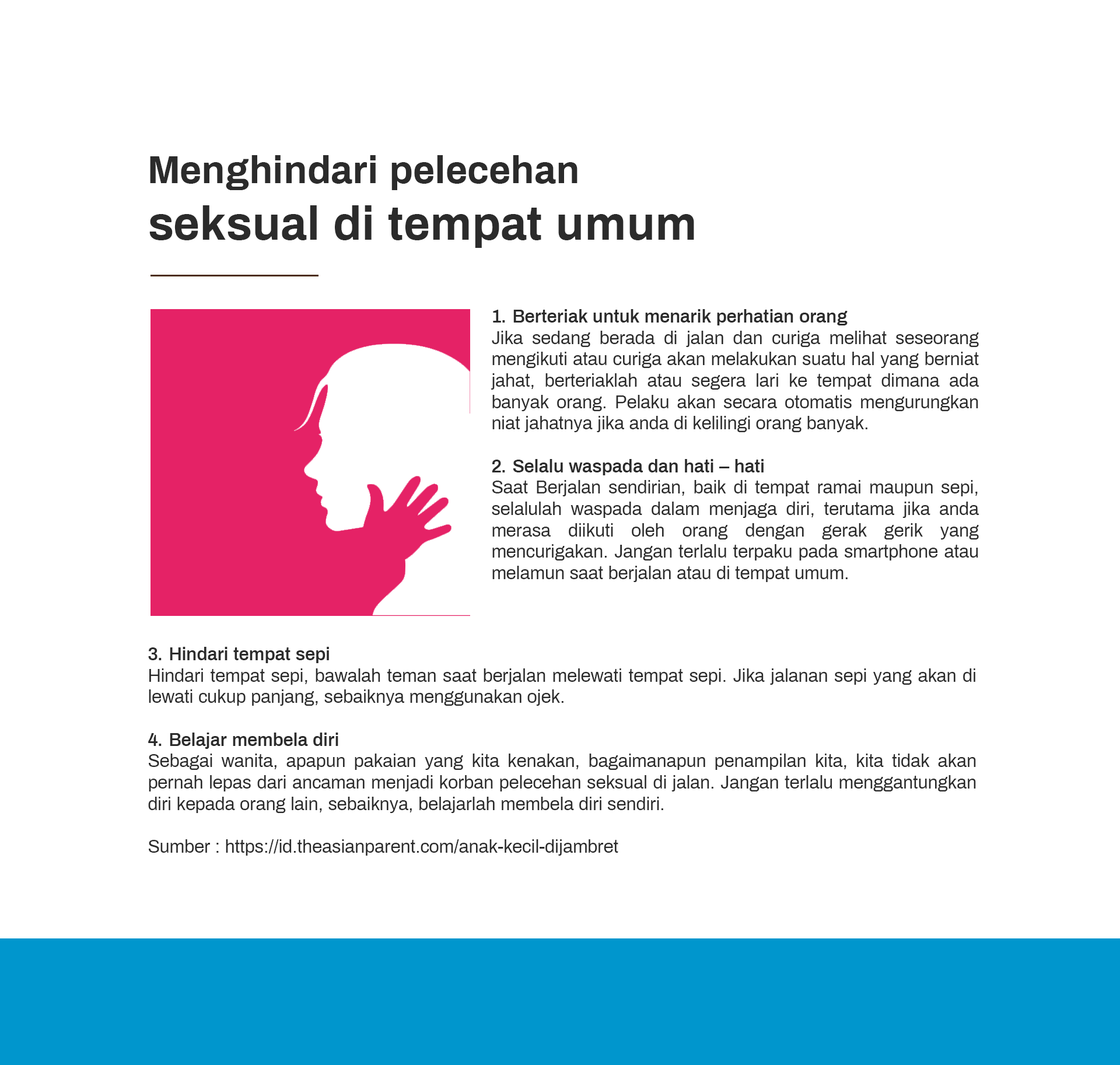
<style>
.page{position:relative;width:1120px;height:1065px;background:#ffffff}
.page>*{position:absolute;margin:0}
.t1{font:47.1px "Archivo-Bold";color:#2b2b2b}
.t2{font:38.9px "Archivo-Bold";color:#2b2b2b}
.t3{font:17.8px "Archivo-Regular";color:#2b2b2b}
.t4{font:17.8px "Archivo-SemiBold";color:#2b2b2b}
</style>
<div class="page">
<p class="t1" style="left:149px;top:155px;width:545px;height:93px"><span class="t2">Menghindari pelecehan<br></span>seksual di tempat umum</p>
<p class="t3" style="left:490px;top:309px;width:489px;height:273px;text-align:justify"><span class="t4">1. Berteriak untuk menarik perhatian orang <br></span>Jika sedang berada di jalan dan curiga melihat seseorang mengikuti atau curiga akan melakukan suatu hal yang berniat jahat, berteriaklah atau segera lari ke tempat dimana ada banyak orang. Pelaku akan secara otomatis mengurungkan niat jahatnya jika anda di kelilingi orang banyak.<br><br><span class="t4">2. Selalu waspada dan hati – hati<br></span>Saat Berjalan sendirian, baik di tempat ramai maupun sepi, selalulah waspada dalam menjaga diri, terutama jika anda merasa diikuti oleh orang dengan gerak gerik yang mencurigakan. Jangan terlalu terpaku pada smartphone atau melamun saat berjalan atau di tempat umum.</p>
<p class="t3" style="left:148px;top:647px;width:828px;height:209px;text-align:justify"><span class="t4">3. Hindari tempat sepi<br></span>Hindari tempat sepi, bawalah teman saat berjalan melewati tempat sepi. Jika jalanan sepi yang akan di lewati cukup panjang, sebaiknya menggunakan ojek. <br><br><span class="t4">4. Belajar membela diri<br></span>Sebagai wanita, apapun pakaian yang kita kenakan, bagaimanapun penampilan kita, kita tidak akan pernah lepas dari ancaman menjadi korban pelecehan seksual di jalan. Jangan terlalu menggantungkan diri kepada orang lain, sebaiknya, belajarlah membela diri sendiri.<br><br>Sumber : https://id.theasianparent.com/anak-kecil-dijambret</p>
</div>
